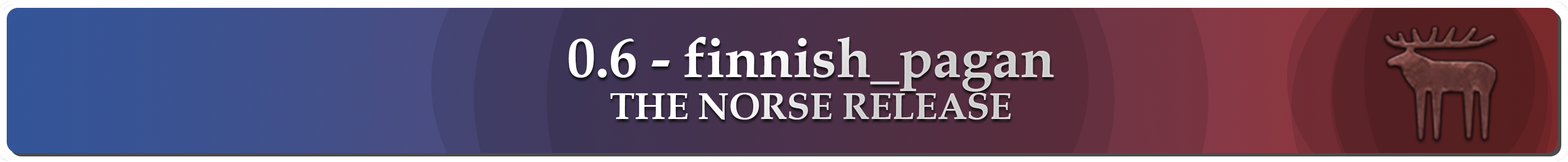
<style>
.page{position:relative;width:1568px;height:162px}
.page>*{position:absolute;margin:0}
.t1{font:56px "BookAntiqua-Bold"}
.t2{font:37.3px/42px "BookAntiqua-Bold"}
</style>
<div class="page">
<p class="t1" style="left:568px;top:37px;width:486px;height:83px;text-align:center">0.6 - finnish_pagan<br><span class="t2">THE NORSE RELEASE</span></p>
</div>
